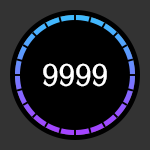
<style>
.page{position:relative;width:150px;height:150px;background:#000000}
.page>*{position:absolute;margin:0}
.t1{font:30px "KoreanGWS-B";color:#ffffff}
</style>
<div class="page">
<p class="t1" style="left:43px;top:63px;width:64px;height:24px">9999</p>
</div>
